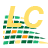
<style>
.page{position:relative;width:48px;height:48px;background:#ffffff}
.page>*{position:absolute;margin:0}
.t1{font:29px "HelveticaNeue-BoldItalic";color:#ffe06b}
</style>
<div class="page">
<p class="t1" style="left:6px;top:6px;width:38px;height:22px">LC</p>
</div>
